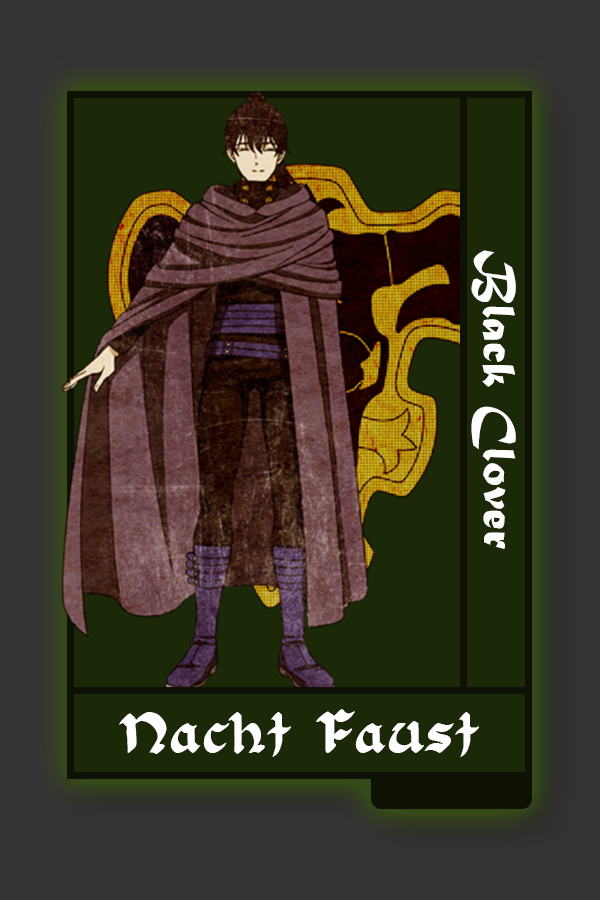
<style>
.page{position:relative;width:600px;height:900px;background:#1b2908}
.page>*{position:absolute;margin:0}
.t1{font:48.8px "MaturaMTScriptCapitals";color:#ffffff}
.t2{font:49.8px "FloranteatLaura";color:#ffffff}
</style>
<div class="page">
<p class="t1" style="left:471px;top:250px;width:45px;height:299px;rotate:90deg">Black Clover</p>
<p class="t2" style="left:119px;top:709px;width:360px;height:48px">Nacht Faust</p>
</div>
